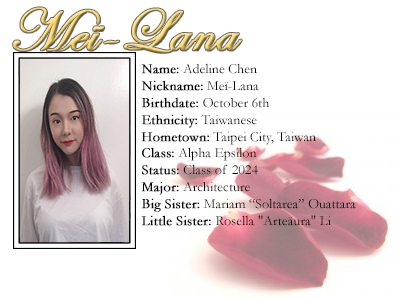
<style>
.page{position:relative;width:400px;height:300px;background:#ffffff}
.page>*{position:absolute;margin:0}
.t1{font:60px "EdwardianScriptITC";font-weight:bold}
.t2{font:14px "Garamond";color:#000000}
.t3{font:14px "Garamond";color:#000000;font-weight:bold}
</style>
<div class="page">
<p class="t1" style="left:13px;top:7px;width:229px;height:46px">Meï-Lana</p>
<p class="t2" style="left:141px;top:63px;width:215px;height:163px"><span class="t3">Name:</span> Adeline Chen<br><span class="t3">Nickname:</span> Meï-Lana<br><span class="t3">Birthdate:</span> October 6th<br><span class="t3">Ethnicity:</span> Taiwanese<br><span class="t3">Hometown:</span> Taipei City, Taiwan<br><span class="t3">Class:</span> Alpha Epsilon<br><span class="t3">Status:</span> Class of 2024<br><span class="t3">Major:</span> Architecture<br><span class="t3">Big Sister:</span> Mariam “Soltarea” Ouattara<br><span class="t3">Little Sister: </span>Rosella "Arteäura" Li</p>
</div>
